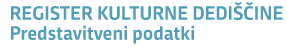
<style>
.page{position:relative;width:287px;height:48px;background:#ffffff}
.page>*{position:absolute;margin:0}
.t1{font:18.7px "Republika-Bold";color:#529dba}
</style>
<div class="page">
<p class="t1" style="left:11px;top:2px;width:272px;height:18px">REGISTER KULTURNE DEDIŠČINE</p>
<p class="t1" style="left:11px;top:25px;width:183px;height:19px">Predstavitveni podatki</p>
</div>
